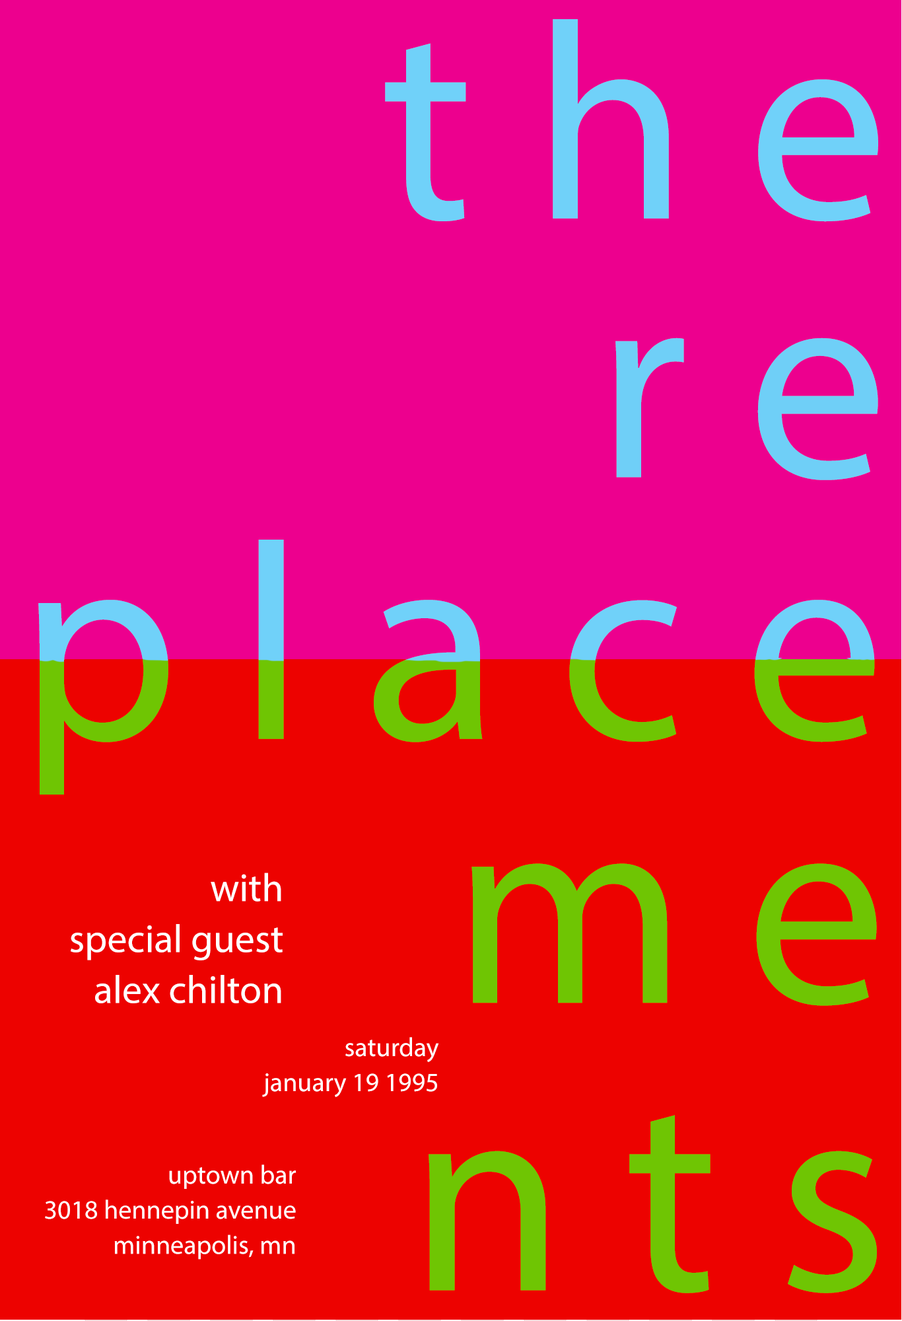
<style>
.page{position:relative;width:902px;height:1321px;background:#ed008e}
.page>*{position:absolute;margin:0}
.t1{font:280.8px "MyriadPro-Regular";color:#70d1f9}
.t2{font:280.8px "MyriadPro-Regular";color:#6fcff7}
.t3{font:280.8px "MyriadPro-Regular"}
.t4{font:280.8px "MyriadPro-Regular";color:#6fc503}
.t5{font:39.6px "MyriadPro-Regular";color:#ffffff}
.t6{font:26.4px "MyriadPro-Regular";color:#ffffff}
</style>
<div class="page">
<p class="t1" style="left:385px;top:19px;width:494px;height:203px">t h e</p>
<p class="t2" style="left:616px;top:338px;width:263px;height:142px">r e</p>
<p class="t3" style="left:38px;top:540px;width:837px;height:255px">p l a c e</p>
<p class="t3" style="left:38px;top:540px;width:837px;height:255px">p l a c e</p>
<p class="t4" style="left:472px;top:863px;width:405px;height:143px">m e</p>
<p class="t5" style="left:71px;top:873px;width:212px;height:131px;text-align:right">with <br>special guest<br>alex chilton</p>
<p class="t6" style="left:262px;top:1037px;width:177px;height:60px;text-align:right">saturday<br>january 19 1995</p>
<p class="t4" style="left:429px;top:1115px;width:448px;height:179px">n t s</p>
<p class="t6" style="left:45px;top:1165px;width:252px;height:95px;text-align:right">uptown bar<br>3018 hennepin avenue<br>minneapolis, mn</p>
</div>
